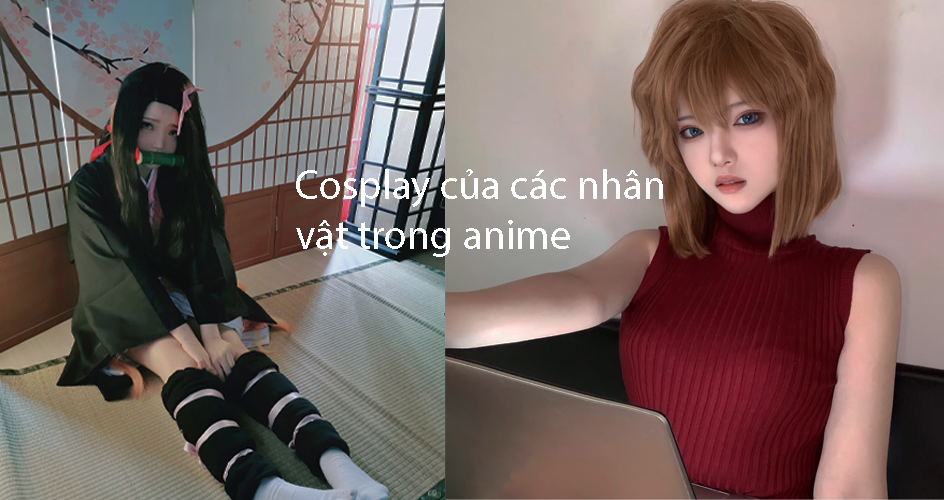
<style>
.page{position:relative;width:944px;height:500px}
.page>*{position:absolute;margin:0}
.t1{font:41.7px "MyriadPro-Regular";color:#ffffff}
</style>
<div class="page">
<p class="t1" style="left:296px;top:169px;width:367px;height:88px">Cosplay của các nhân vật trong anime</p>
</div>
